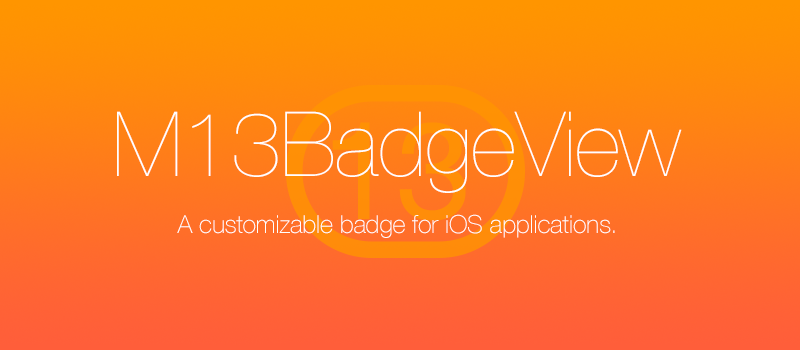
<style>
.page{position:relative;width:800px;height:350px}
.page>*{position:absolute;margin:0}
.t1{font:90px "HelveticaNeue-UltraLight";letter-spacing:-0.007em;color:#ffffff}
.t2{font:25px "HelveticaNeue-Thin";letter-spacing:-0.007em;color:#ffffff}
</style>
<div class="page">
<p class="t1" style="left:117px;top:111px;width:565px;height:82px">M13BadgeView</p>
<p class="t2" style="left:177px;top:214px;width:438px;height:24px">A customizable badge for iOS applications.</p>
</div>
